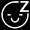
<style>
.page{position:relative;width:30px;height:30px;background:#000000}
.page>*{position:absolute;margin:0}
.t1{font:21.6px "MyriadPro-Regular";color:#ffffff}
</style>
<div class="page">
<p class="t1" style="left:20px;top:1px;width:9px;height:11px">z</p>
</div>
